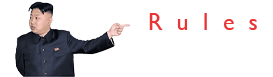
<style>
.page{position:relative;width:273px;height:77px;background:#ffffff}
.page>*{position:absolute;margin:0}
.t1{font:24px "GillSans";letter-spacing:0.6em;color:#e93535}
</style>
<div class="page">
<p class="t1" style="left:149px;top:13px;width:108px;height:17px">Rules</p>
</div>
